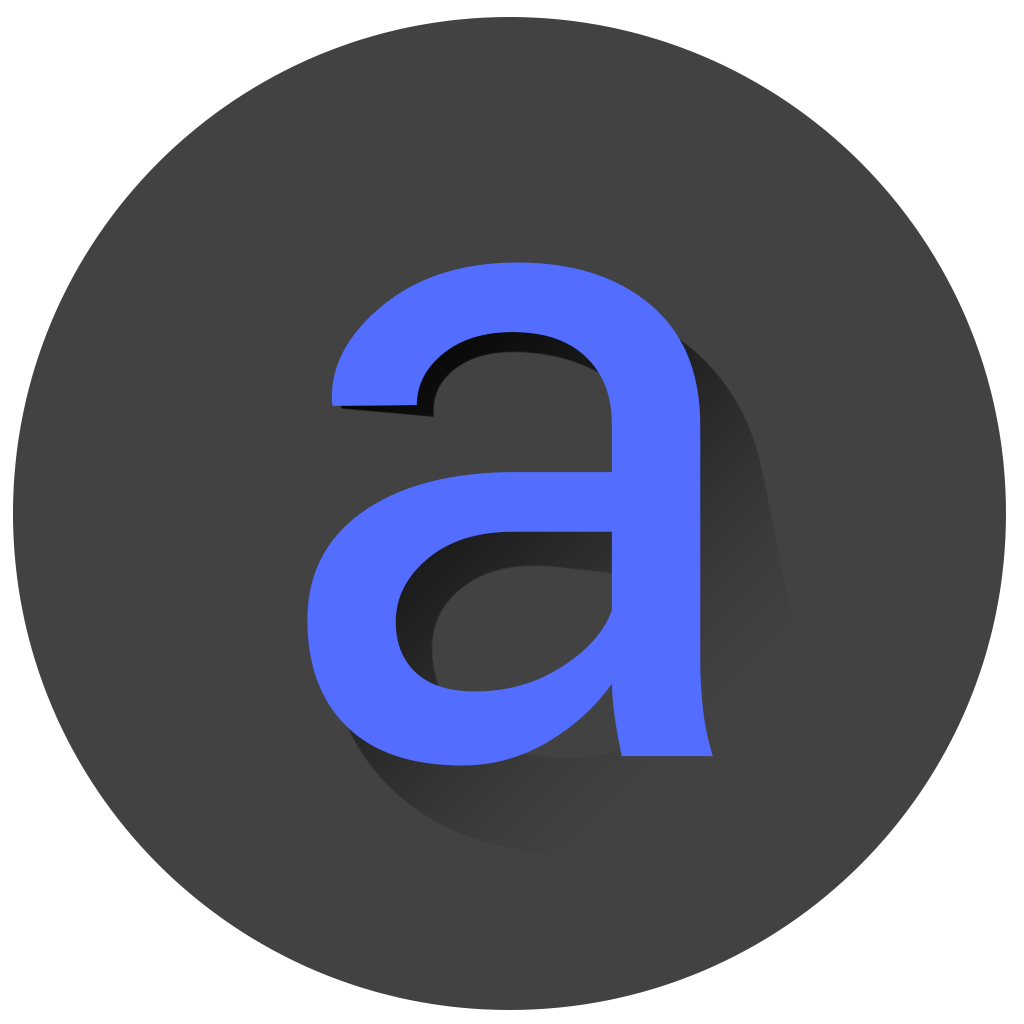
<style>
.page{position:relative;width:1024px;height:1024px;background:#424242}
.page>*{position:absolute;margin:0}
.t1{font:916.7px "Roboto-Regular";color:#536dfe}
</style>
<div class="page">
<p class="t1" style="left:307px;top:262px;width:406px;height:504px">a</p>
</div>
